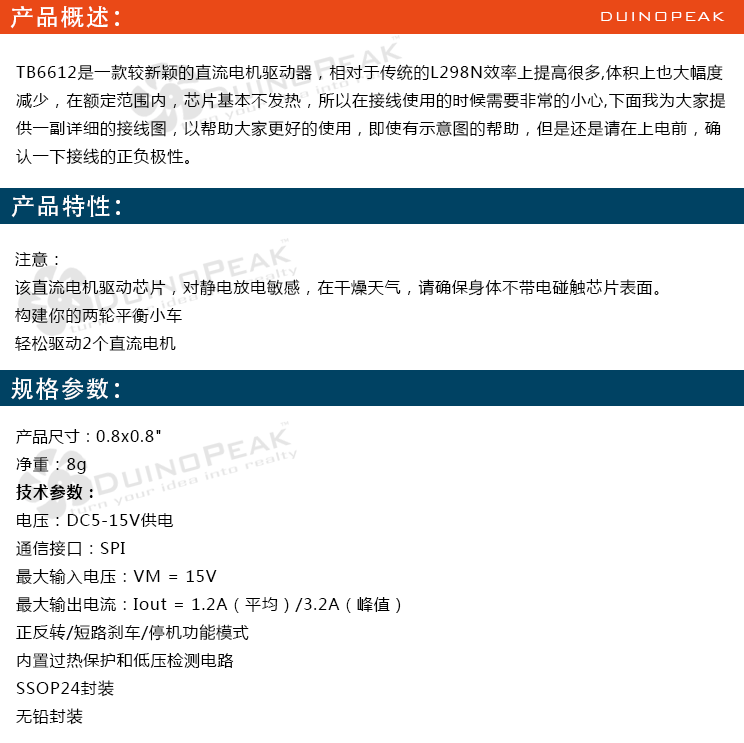
<style>
.page{position:relative;width:744px;height:743px;background:#ffffff}
.page>*{position:absolute;margin:0}
.t1{font:24px "AdobeHeitiStd-Regular";letter-spacing:0.05em;color:#ffffff}
.t2{font:18px "BankGothicBT-Light";letter-spacing:0.05em;color:#ffffff}
.t3{font:16px "MicrosoftYaHei";letter-spacing:0.05em;color:#000000}
.t4{font:16px "MicrosoftYaHei";color:#000000}
.t5{font:16px "MicrosoftYaHei-Bold";letter-spacing:0.05em;color:#000000}
</style>
<div class="page">
<p class="t1" style="left:10px;top:6px;width:109px;height:23px">产品概述：</p>
<p class="t2" style="left:601px;top:12px;width:124px;height:9px">DUINOPEAK</p>
<p class="t3" style="left:16px;top:64px;width:710px;height:100px">TB6612是一款较新颖的直流电机驱动器，相对于传统的L298N效率上提高很多,体积上也大幅度<br>减少，在额定范围内，芯片基本不发热，所以在接线使用的时候需要非常的小心,下面我为大家提<br>供一副详细的接线图，以帮助大家更好的使用，即使有示意图的帮助，但是还是请在上电前，确<br>认一下接线的正负极性。</p>
<p class="t1" style="left:11px;top:194px;width:109px;height:24px">产品特性：</p>
<p class="t3" style="left:15px;top:251px;width:644px;height:100px">注意：<br>该直流电机驱动芯片，对静电放电敏感，在干燥天气，请确保身体不带电碰触芯片表面。<br>构建你的两轮平衡小车<br>轻松驱动2个直流电机</p>
<p class="t1" style="left:11px;top:377px;width:108px;height:23px">规格参数：</p>
<p class="t3" style="left:16px;top:429px;width:385px;height:296px"><span class="t4">产品尺寸：</span>0.8x0.8"<br>净重：8g<br><span class="t5">技术参数：<br></span>电压：DC5-15V供电<br>通信接口：SPI<br>最大输入电压：VM = 15V<br>最大输出电流：Iout = 1.2A（平均）/3.2A（峰值）<br>正反转/短路刹车/停机功能模式<br>内置过热保护和低压检测电路<br>SSOP24封装<br>无铅封装</p>
</div>
